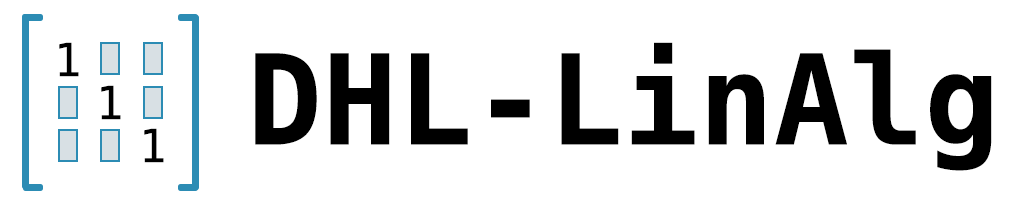
<style>
.page{position:relative;width:1025px;height:205px;background:#ffffff}
.page>*{position:absolute;margin:0}
.t1{font:45.8px "DejaVuSansMono";color:#000000}
.t2{font:125px "DejaVuSansMono-Bold";color:#000000}
</style>
<div class="page">
<p class="t1" style="left:59px;top:42px;width:20px;height:35px">1</p>
<p class="t2" style="left:255px;top:42px;width:737px;height:129px">DHL-LinAlg</p>
<p class="t1" style="left:101px;top:85px;width:20px;height:35px">1</p>
<p class="t1" style="left:144px;top:128px;width:20px;height:35px">1</p>
</div>
